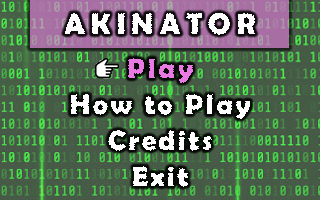
<style>
.page{position:relative;width:320px;height:200px}
.page>*{position:absolute;margin:0}
.t1{font:30px "BerlinSansFBDemi-Bold";letter-spacing:0.2em;color:#ffffff}
.t2{font:28px "BerlinSansFBDemi-Bold";letter-spacing:0.1em;color:#e97ae3}
.t3{font:28px "BerlinSansFBDemi-Bold";letter-spacing:0.1em;color:#ffffff}
</style>
<div class="page">
<p class="t1" style="left:64px;top:13px;width:191px;height:22px">AKINATOR</p>
<p class="t2" style="left:128px;top:58px;width:65px;height:25px">Play</p>
<p class="t3" style="left:71px;top:94px;width:179px;height:25px">How to Play</p>
<p class="t3" style="left:108px;top:130px;width:104px;height:21px">Credits</p>
<p class="t3" style="left:133px;top:166px;width:55px;height:21px">Exit</p>
</div>
